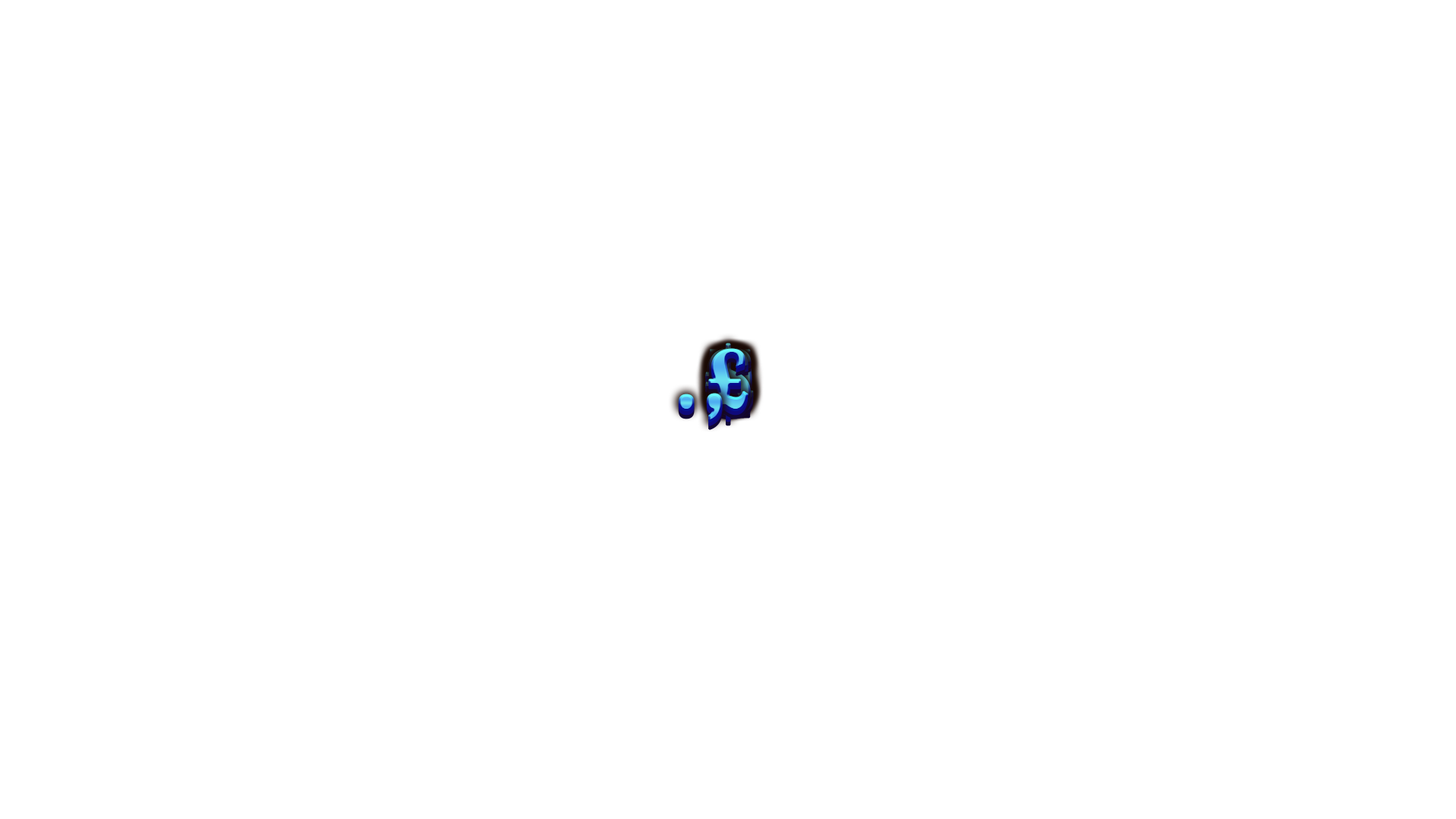
<style>
.page{position:relative;width:1456px;height:819px;background:#ffffff}
.page>*{position:absolute;margin:0}
.t1{font:88.5px "BritannicBold";letter-spacing:0.02em;text-transform:uppercase;font-weight:bold;scale:0.91 1}
</style>
<div class="page">
<p class="t1" style="left:704px;top:348px;width:50px;height:64px">€</p>
<p class="t1" style="left:707px;top:348px;width:46px;height:64px">8</p>
<p class="t1" style="left:707px;top:348px;width:45px;height:64px">9</p>
<p class="t1" style="left:707px;top:348px;width:41px;height:64px">£</p>
<p class="t1" style="left:708px;top:348px;width:45px;height:64px">6</p>
<p class="t1" style="left:708px;top:343px;width:43px;height:76px">$</p>
<p class="t1" style="left:678px;top:394px;width:17px;height:18px">.</p>
<p class="t1" style="left:706px;top:393px;width:17px;height:29px">,</p>
</div>
